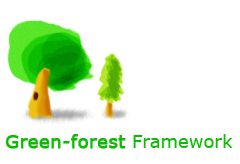
<style>
.page{position:relative;width:240px;height:164px;background:#ffffff}
.page>*{position:absolute;margin:0}
.t1{font:18px "Verdana";color:#0bbc00;font-weight:bold}
.t2{font:18px "Verdana";color:#0bbc00}
</style>
<div class="page">
<p class="t1" style="left:5px;top:134px;width:228px;height:15px">Green-forest<span class="t2"> Framework</span></p>
</div>
